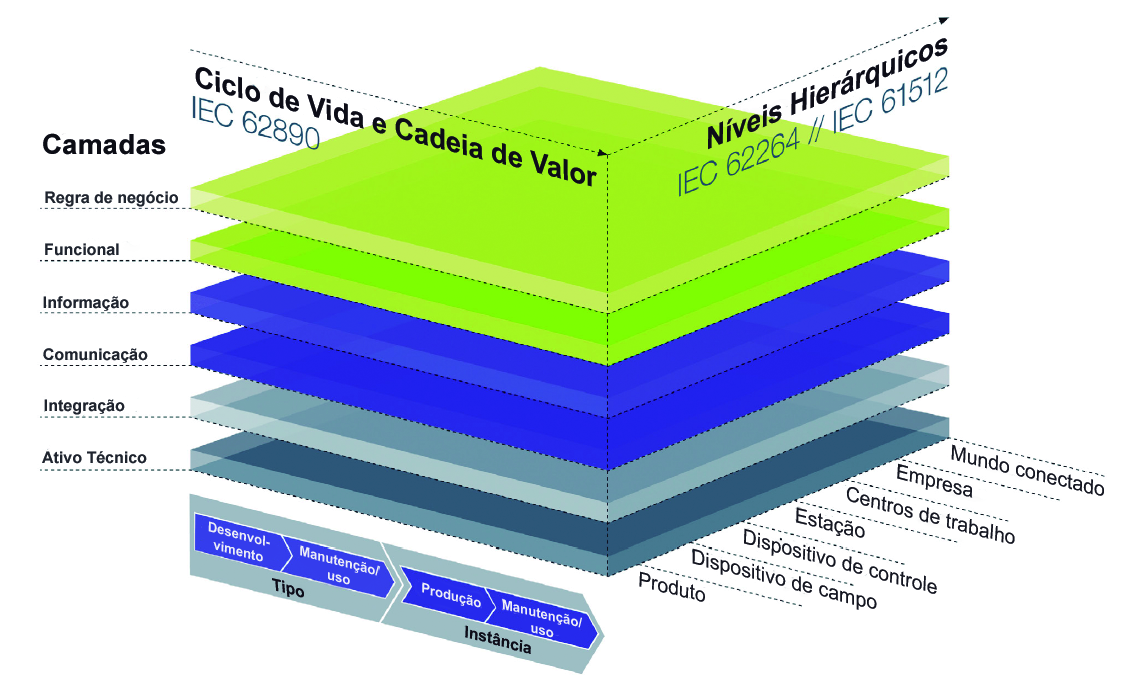
<style>
.page{position:relative;width:1134px;height:681px;background:#ffffff}
.page>*{position:absolute;margin:0}
.t1{font:30.5px "Arial-BoldMT";color:#0d0d17;scale:0.92 1}
.t2{font:29px "Arial-BoldMT";color:#0d0d17;scale:0.97 1}
.t3{font:28px "Arial-BoldMT";color:#0c0d15}
.t4{font:16px "Arial-BoldMT";color:#1f242e}
.t5{font:20.4px "ArialMT";color:#141620}
.t6{font:13.8px "Arial-BoldMT";color:#edeef6}
.t7{font:20.5px "ArialMT";color:#141620}
.t8{font:16.7px "Arial-BoldMT";color:#0d0c17;scale:0.96 1}
.t9{font:20.6px "ArialMT";color:#141620;scale:0.96 1}
.t10{font:16.4px "Arial-BoldMT";color:#0d0c17}
</style>
<div class="page">
<p class="t1" style="left:708px;top:38px;width:240px;height:112px;rotate:-22deg">Níveis Hierárquicos</p>
<p class="t2" style="left:195px;top:67px;width:402px;height:120px;rotate:14deg">Ciclo de Vida e Cadeia de Valor</p>
<p class="t3" style="left:43px;top:133px;width:123px;height:22px">Camadas</p>
<p class="t4" style="left:45px;top:191px;width:133px;height:16px">Regra de negócio</p>
<p class="t4" style="left:45px;top:243px;width:74px;height:13px">Funcional</p>
<p class="t4" style="left:43px;top:296px;width:86px;height:15px">Informação</p>
<p class="t4" style="left:43px;top:348px;width:105px;height:15px">Comunicação</p>
<p class="t4" style="left:44px;top:399px;width:81px;height:16px">Integração</p>
<p class="t5" style="left:951px;top:444px;width:153px;height:52px;rotate:14deg">Mundo conectado</p>
<p class="t4" style="left:42px;top:451px;width:105px;height:13px">Ativo Técnico</p>
<p class="t5" style="left:897px;top:463px;width:76px;height:35px;rotate:15deg">Empresa</p>
<p class="t5" style="left:847px;top:487px;width:168px;height:57px;rotate:15deg">Centros de trabalho</p>
<p class="t5" style="left:796px;top:507px;width:69px;height:31px;rotate:13deg">Estação</p>
<p class="t6" style="left:208px;top:521px;width:62px;height:41px;text-align:center;rotate:15deg">Desenvol-<br>vimento</p>
<p class="t7" style="left:744px;top:528px;width:193px;height:66px;rotate:15deg">Dispositivo de controle</p>
<p class="t6" style="left:300px;top:545px;width:80px;height:40px;text-align:center;rotate:15deg">Manutenção/<br>uso</p>
<p class="t5" style="left:692px;top:548px;width:185px;height:62px;rotate:14deg">Dispositivo de campo</p>
<p class="t8" style="left:272px;top:578px;width:32px;height:20px;rotate:13deg">Tipo</p>
<p class="t6" style="left:422px;top:582px;width:59px;height:26px;rotate:15deg">Produção</p>
<p class="t9" style="left:639px;top:571px;width:66px;height:31px;rotate:14deg">Produto</p>
<p class="t6" style="left:503px;top:599px;width:79px;height:39px;text-align:center;rotate:13deg">Manutenção/<br>uso</p>
<p class="t10" style="left:465px;top:625px;width:66px;height:29px;rotate:15deg">Instância</p>
</div>
